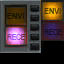
<style>
.page{position:relative;width:64px;height:64px;background:#000000}
.page>*{position:absolute;margin:0}
.t1{font:7.6px "ArialMT";color:#181000;text-transform:uppercase;font-weight:bold;scale:0.94 1}
.t2{font:7.6px "ArialMT";color:#523c08;text-transform:uppercase;font-weight:bold;scale:0.94 1}
.t3{font:7.6px "ArialMT";letter-spacing:-0.04em;color:#181029;text-transform:uppercase;scale:0.9 1}
.t4{font:7.6px "ArialMT";letter-spacing:-0.04em;color:#181029;scale:0.9 1}
.t5{font:7.6px "ArialMT";letter-spacing:-0.04em;scale:0.9 1}
.t6{font:7.6px "ArialMT";letter-spacing:-0.04em;text-transform:uppercase;scale:0.9 1}
</style>
<div class="page">
<p class="t1" style="left:7px;top:13px;width:17px;height:6px">envi</p>
<p class="t1" style="left:7px;top:13px;width:17px;height:6px">envi</p>
<p class="t2" style="left:44px;top:8px;width:17px;height:6px">envi</p>
<p class="t2" style="left:44px;top:8px;width:17px;height:6px">envi</p>
<p class="t3" style="left:44px;top:29px;width:19px;height:6px">rece</p>
<p class="t4" style="left:44px;top:29px;width:19px;height:6px">RECE</p>
<p class="t5" style="left:7px;top:34px;width:19px;height:6px">RECE</p>
<p class="t6" style="left:7px;top:34px;width:19px;height:6px">rece</p>
</div>
